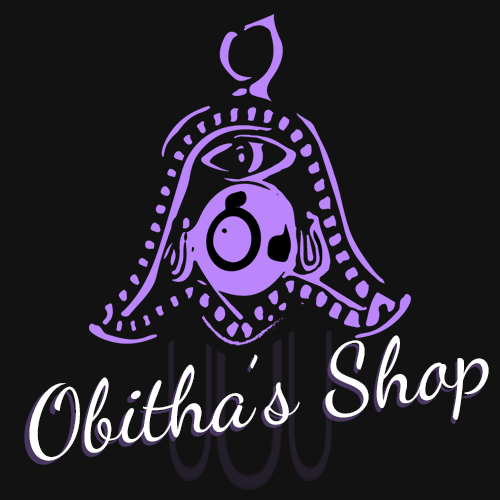
<style>
.page{position:relative;width:500px;height:500px;background:#121212}
.page>*{position:absolute;margin:0}
.t1{font:93.4px "DancingScriptOT"}
.t2{font:92.9px "DancingScriptOT";color:#fefefe}
</style>
<div class="page">
<p class="t1" style="left:24px;top:339px;width:463px;height:126px;rotate:-8deg">Obitha’s Shop</p>
<p class="t2" style="left:29px;top:335px;width:460px;height:126px;rotate:-8deg">Obitha’s Shop</p>
</div>
